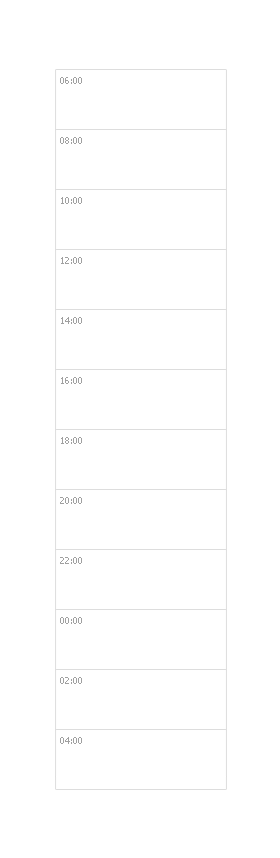
<style>
.page{position:relative;width:280px;height:858px;background:#ffffff}
.page>*{position:absolute;margin:0}
.t1{font:9px "Tahoma";color:#a0a0a0}
</style>
<div class="page">
<p class="t1" style="left:60px;top:77px;width:22px;height:7px">06:00</p>
<p class="t1" style="left:60px;top:137px;width:22px;height:7px">08:00</p>
<p class="t1" style="left:61px;top:197px;width:21px;height:7px">10:00</p>
<p class="t1" style="left:61px;top:257px;width:21px;height:7px">12:00</p>
<p class="t1" style="left:61px;top:317px;width:21px;height:7px">14:00</p>
<p class="t1" style="left:61px;top:377px;width:21px;height:7px">16:00</p>
<p class="t1" style="left:61px;top:437px;width:21px;height:7px">18:00</p>
<p class="t1" style="left:60px;top:497px;width:22px;height:7px">20:00</p>
<p class="t1" style="left:60px;top:557px;width:22px;height:7px">22:00</p>
<p class="t1" style="left:60px;top:617px;width:22px;height:7px">00:00</p>
<p class="t1" style="left:60px;top:677px;width:22px;height:7px">02:00</p>
<p class="t1" style="left:60px;top:737px;width:22px;height:7px">04:00</p>
</div>
